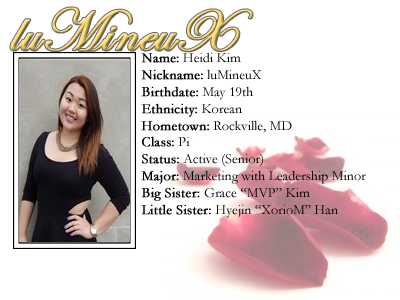
<style>
.page{position:relative;width:400px;height:300px;background:#ffffff}
.page>*{position:absolute;margin:0}
.t1{font:60px "EdwardianScriptITC";font-weight:bold}
.t2{font:14px "Garamond";color:#000000}
.t3{font:14px "Garamond";color:#000000;font-weight:bold}
</style>
<div class="page">
<p class="t1" style="left:10px;top:7px;width:243px;height:45px">luMineuX</p>
<p class="t2" style="left:141px;top:52px;width:225px;height:166px"><span class="t3">Name:</span> Heidi Kim<br><span class="t3">Nickname:</span> luMineuX<br><span class="t3">Birthdate:</span> May 19th <br><span class="t3">Ethnicity:</span> Korean<br><span class="t3">Hometown:</span> Rockville, MD<br><span class="t3">Class:</span> Pi<br><span class="t3">Status:</span> Active (Senior)<br><span class="t3">Major:</span> Marketing with Leadership Minor <br><span class="t3">Big Sister: </span>Grace “MVP” Kim<br><span class="t3">Little Sister: </span>Hyejin “XorioM” Han</p>
</div>
